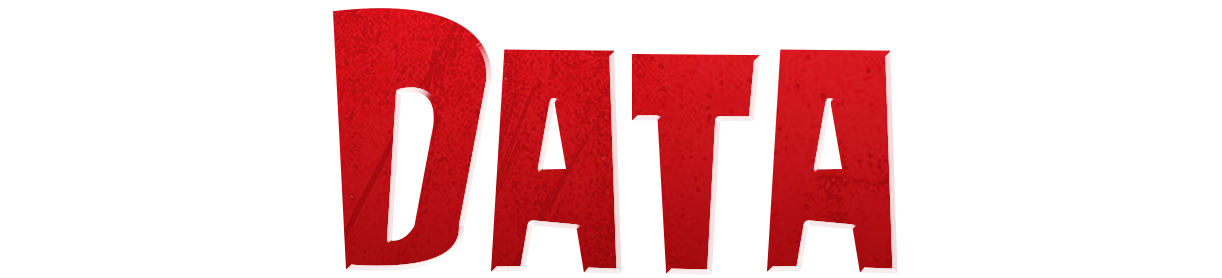
<style>
.page{position:relative;width:1222px;height:278px;background:#ffffff}
.page>*{position:absolute;margin:0}
.t1{font:277.1px "Samdan";scale:1.34 1}
.t2{font:335.2px "Samdan";scale:1.34 1}
</style>
<div class="page">
<p class="t1" style="left:333px;top:8px;width:565px;height:267px"><span class="t2">D</span>ata</p>
</div>
